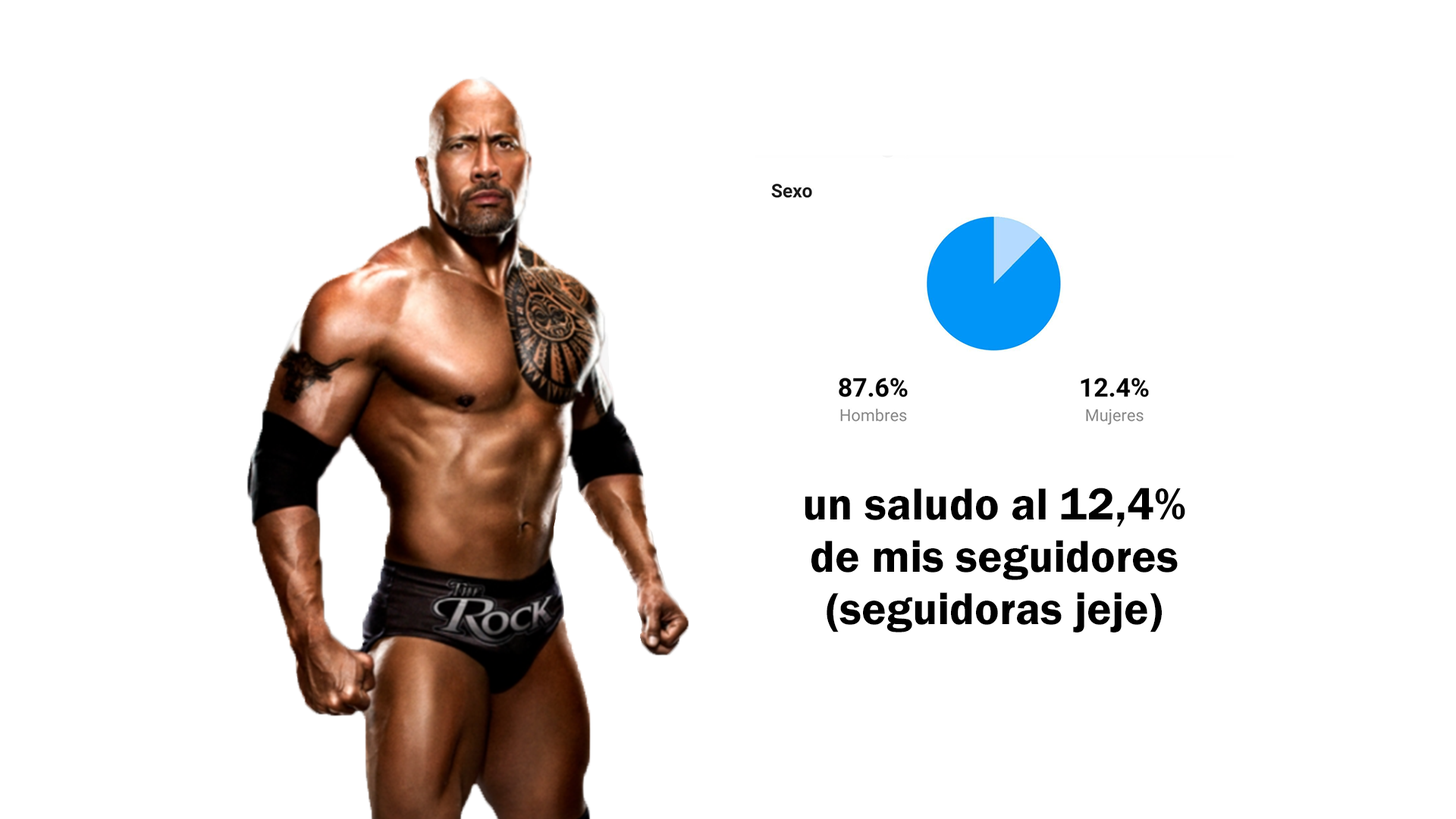
<style>
.page{position:relative;width:1456px;height:819px;background:#ffffff}
.page>*{position:absolute;margin:0}
.t1{font:46.4px "FranklinGothic-Demi";color:#000000}
</style>
<div class="page">
<p class="t1" style="left:805px;top:488px;width:380px;height:144px;text-align:center">un saludo al 12,4%<br>de mis seguidores<br>(seguidoras jeje)</p>
</div>
